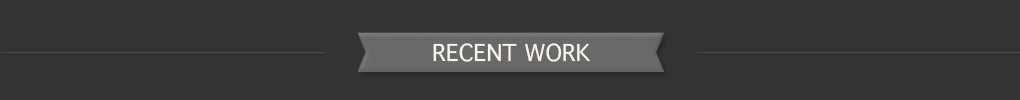
<style>
.page{position:relative;width:1020px;height:100px;background:#333333}
.page>*{position:absolute;margin:0}
.t1{font:22.4px "Thonburi";color:#f6f5f1}
</style>
<div class="page">
<p class="t1" style="left:433px;top:43px;width:158px;height:19px">RECENT WORK</p>
</div>
